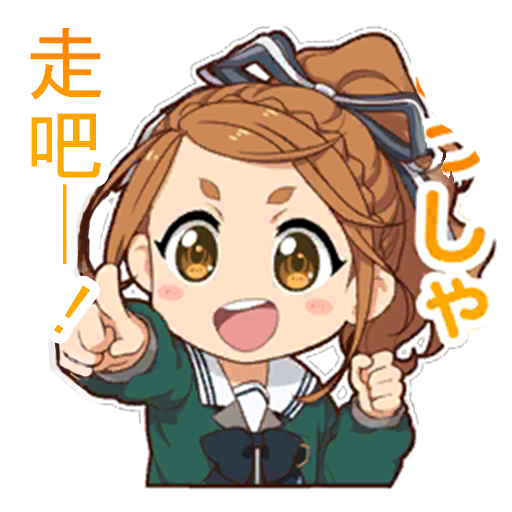
<style>
.page{position:relative;width:512px;height:512px;background:#ffffff}
.page>*{position:absolute;margin:0}
.t1{font:80px "MS-UIGothic";color:#ff9300}
</style>
<div class="page">
<p class="t1" style="left:30px;top:28px;width:72px;height:236px">走吧─</p>
<p class="t1" style="left:54px;top:285px;width:37px;height:49px;rotate:-56deg">!</p>
</div>
